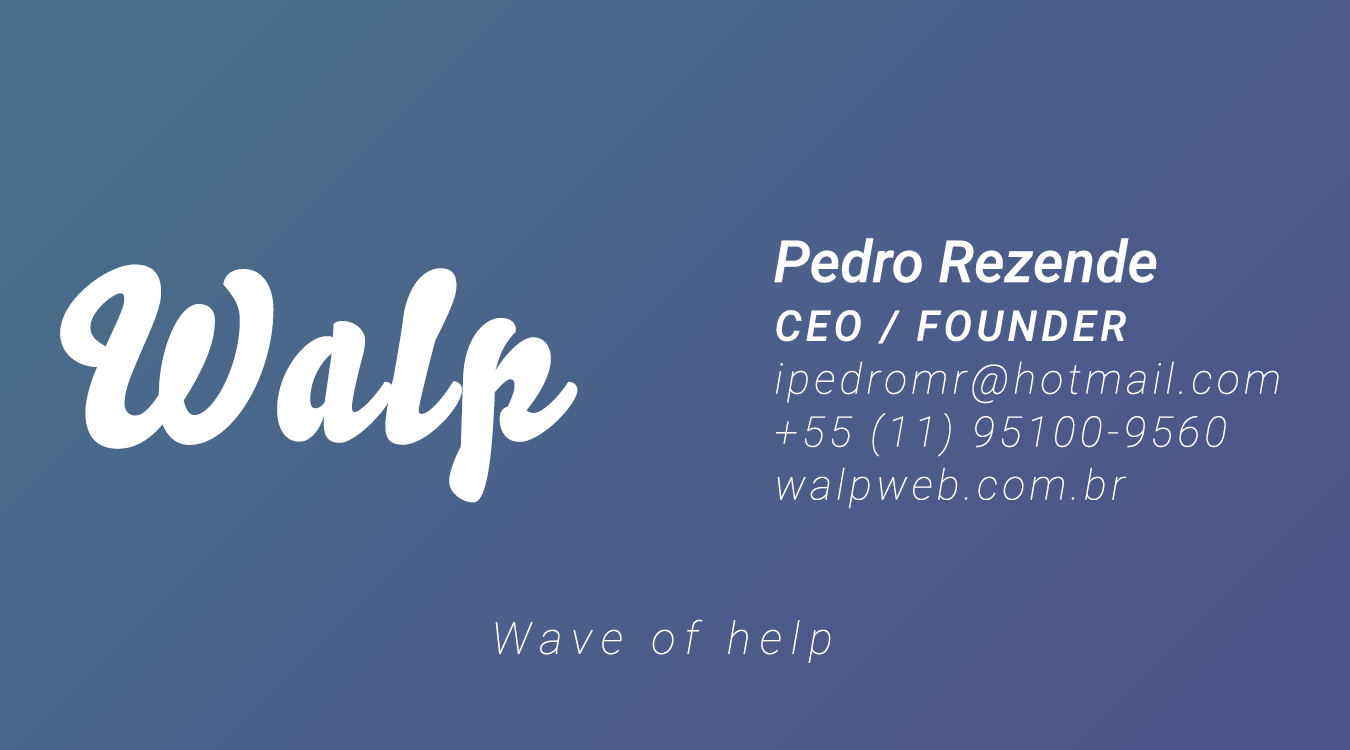
<style>
.page{position:relative;width:1350px;height:750px}
.page>*{position:absolute;margin:0}
.t1{font:58.2px "Roboto-MediumItalic";color:#ffffff}
.t2{font:236.4px "Bello-Pro";letter-spacing:0.05em;color:#ffffff;scale:0.94 1}
.t3{font:42.3px/52.9px "Roboto-ThinItalic";letter-spacing:0.1em;color:#ffffff}
.t4{font:42.3px/52.9px "Roboto-MediumItalic";letter-spacing:0.1em;color:#ffffff}
.t5{font:44.8px "Roboto-ThinItalic";letter-spacing:0.2em;color:#ffffff}
</style>
<div class="page">
<p class="t1" style="left:774px;top:238px;width:383px;height:45px">Pedro Rezende</p>
<p class="t2" style="left:60px;top:264px;width:518px;height:239px">Walp</p>
<p class="t3" style="left:776px;top:310px;width:503px;height:199px"><span class="t4">CEO / FOUNDER<br></span>ipedromr@hotmail.com<br>+55 (11) 95100-9560<br>walpweb.com.br</p>
<p class="t5" style="left:495px;top:619px;width:336px;height:44px">Wave of help</p>
</div>
